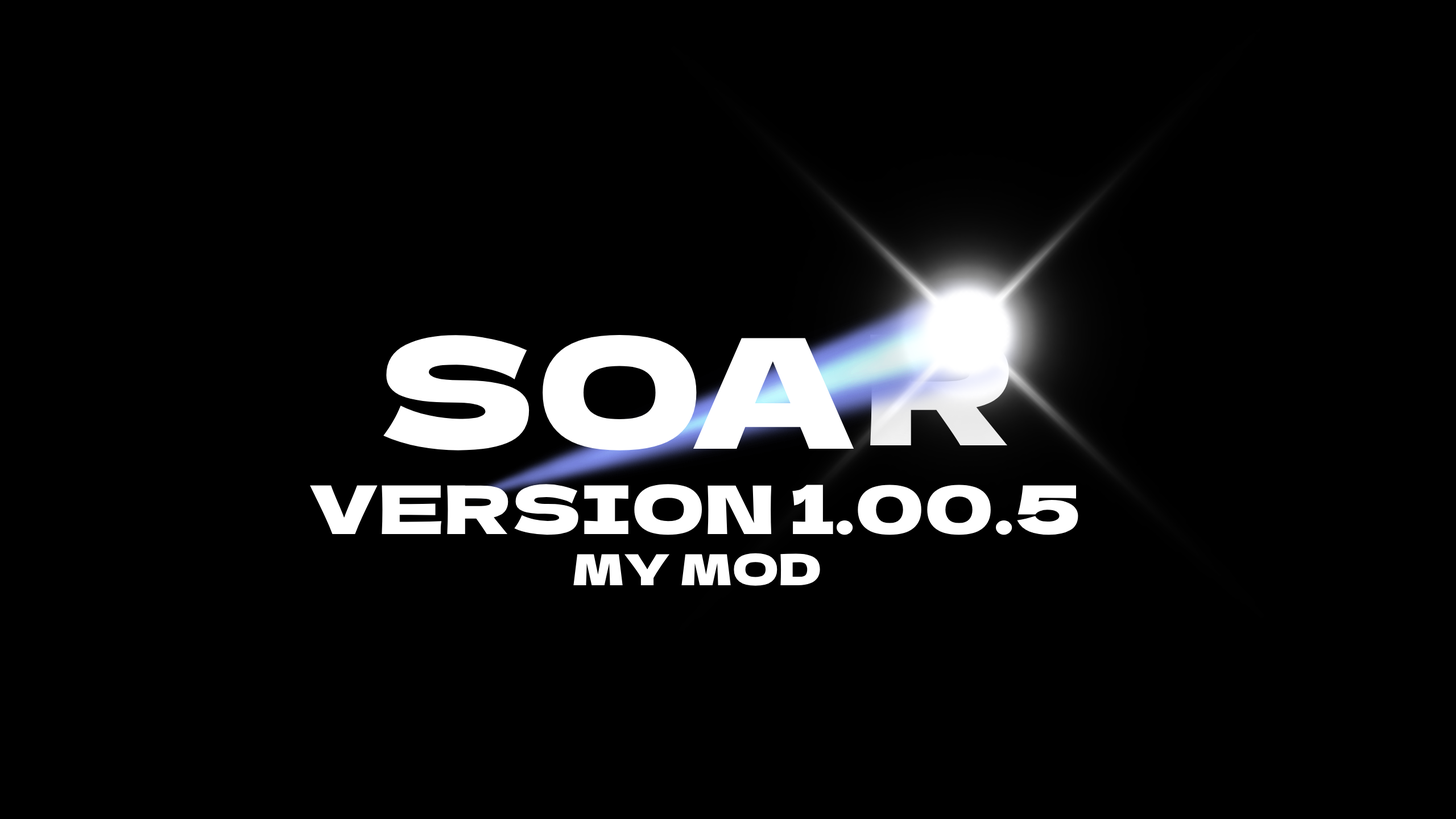
<style>
.page{position:relative;width:1456px;height:819px;background:#000000}
.page>*{position:absolute;margin:0}
.t1{font:152.3px "DelaGothicOne-Regular";color:#ffffff;scale:1.13 1}
.t2{font:66.9px "DelaGothicOne-Regular";color:#ffffff;scale:1.13 1}
.t3{font:42.8px "DelaGothicOne-Regular";color:#ffffff;scale:1.13 1}
</style>
<div class="page">
<p class="t1" style="left:383px;top:335px;width:471px;height:115px">SOA</p>
<p class="t1" style="left:870px;top:334px;width:139px;height:111px">R</p>
<p class="t2" style="left:310px;top:484px;width:768px;height:102px">VERSION 1.00.5<br>                           <span class="t3">MY MOD</span></p>
</div>
